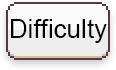
<style>
.page{position:relative;width:116px;height:70px;background:#ededed}
.page>*{position:absolute;margin:0}
.t1{font:26px "ArialMT";color:#020000}
</style>
<div class="page">
<p class="t1" style="left:11px;top:19px;width:96px;height:24px">Difficulty</p>
</div>
